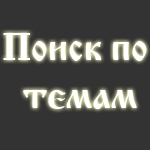
<style>
.page{position:relative;width:150px;height:150px;background:#333333}
.page>*{position:absolute;margin:0}
.t1{font:40px "CyrillicOld";color:#ffffff}
</style>
<div class="page">
<p class="t1" style="left:3px;top:33px;width:144px;height:76px;text-align:center">Поиск по<br> темам</p>
</div>
